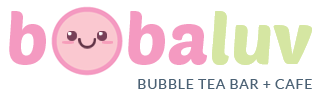
<style>
.page{position:relative;width:320px;height:90px;background:#ffffff}
.page>*{position:absolute;margin:0}
.t1{font:71.2px "PoetsenOne-Regular";color:#f49ac1}
.t2{font:71.2px "PoetsenOne-Regular";color:#d5e6a2}
.t3{font:14.1px "Lato-Regular";letter-spacing:0.05em;color:#4b6174}
</style>
<div class="page">
<p class="t1" style="left:9px;top:11px;width:198px;height:54px">b     ba</p>
<p class="t2" style="left:212px;top:11px;width:100px;height:54px">luv</p>
<p class="t2" style="left:212px;top:11px;width:100px;height:54px">luv</p>
<p class="t2" style="left:212px;top:11px;width:100px;height:54px">luv</p>
<p class="t2" style="left:212px;top:11px;width:100px;height:54px">luv</p>
<p class="t3" style="left:138px;top:79px;width:174px;height:10px">BUBBLE TEA BAR + CAFE</p>
</div>
